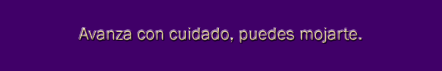
<style>
.page{position:relative;width:442px;height:71px;background:#400068}
.page>*{position:absolute;margin:0}
.t1{font:18px "FranklinGothic-Book";color:#d4c088}
</style>
<div class="page">
<p class="t1" style="left:79px;top:28px;width:283px;height:15px">Avanza con cuidado, puedes mojarte.</p>
</div>
